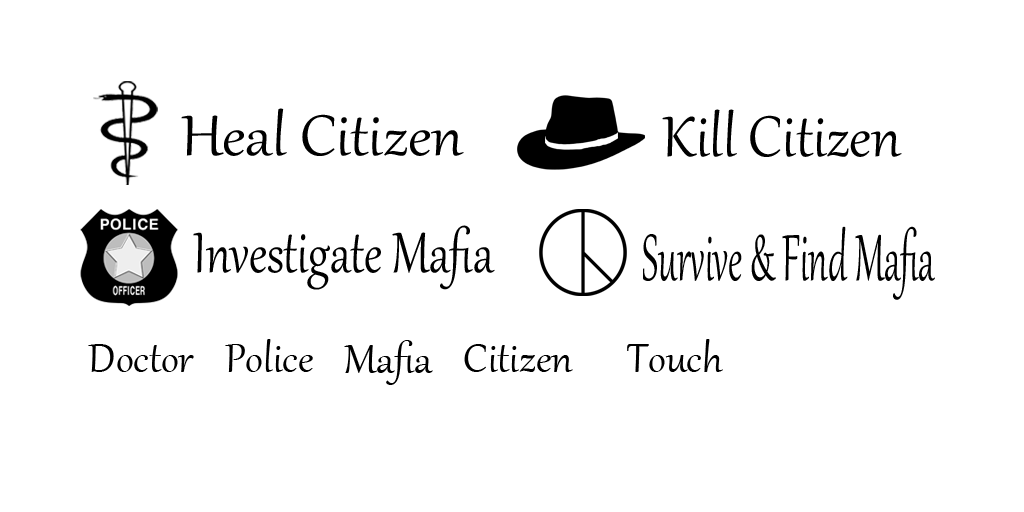
<style>
.page{position:relative;width:1024px;height:512px;background:#ffffff}
.page>*{position:absolute;margin:0}
.t1{font:70px "Gabriola";color:#000000;scale:1.07 1}
.t2{font:70px "Gabriola";color:#000000}
.t3{font:70px "Gabriola";color:#000000;scale:0.82 1}
.t4{font:80.3px "Gabriola";color:#000000;scale:0.56 1}
.t5{font:50px "Gabriola";color:#000000}
</style>
<div class="page">
<p class="t1" style="left:181px;top:108px;width:283px;height:48px">Heal Citizen</p>
<p class="t2" style="left:662px;top:109px;width:240px;height:48px">Kill Citizen</p>
<p class="t3" style="left:193px;top:225px;width:302px;height:65px">Investigate Mafia</p>
<p class="t4" style="left:643px;top:226px;width:292px;height:74px">Survive &amp; Find Mafia</p>
<p class="t5" style="left:225px;top:339px;width:88px;height:33px">Police</p>
<p class="t5" style="left:344px;top:340px;width:89px;height:45px">Mafia</p>
<p class="t5" style="left:627px;top:339px;width:96px;height:33px">Touch</p>
<p class="t5" style="left:88px;top:344px;width:106px;height:28px">Doctor</p>
<p class="t5" style="left:464px;top:344px;width:109px;height:28px">Citizen</p>
</div>
